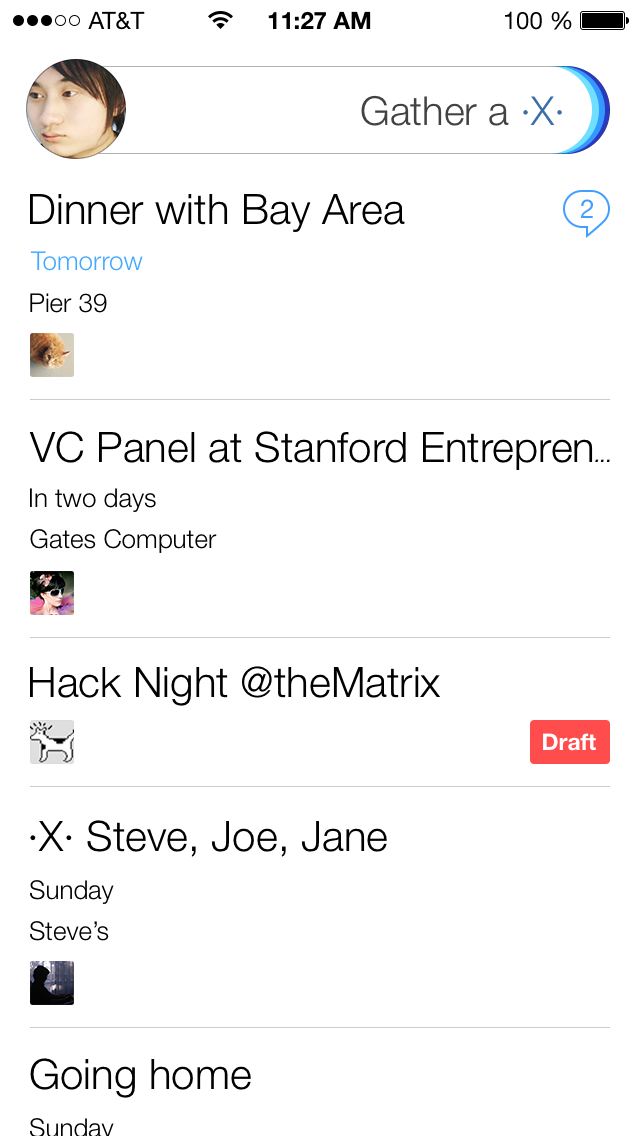
<style>
.page{position:relative;width:640px;height:1136px;background:#ffffff}
.page>*{position:absolute;margin:0}
.t1{font:24px "HelveticaNeueLTStd-Roman";color:#000000}
.t2{font:24px "HelveticaNeueLTStd-Bd";color:#000000}
.t3{font:40px "HelveticaNeue-Light";color:#424242}
.t4{font:40px "HelveticaNeue-Light";color:#3a6ea5}
.t5{font:42px "HelveticaNeue-Light";color:#000000}
.t6{font:26px "HelveticaNeue";color:#429eff}
.t7{font:26px "HelveticaNeue-Light";color:#44a9ff}
.t8{font:26px "HelveticaNeue-Light";color:#000000}
.t9{font:21px "HelveticaNeue-Italic";color:#000000}
.t10{font:23px "HelveticaNeue-Bold";color:#ffffff}
</style>
<div class="page">
<p class="t1" style="left:88px;top:11px;width:57px;height:19px">AT&amp;T</p>
<p class="t2" style="left:268px;top:11px;width:103px;height:18px">11:27 AM</p>
<p class="t1" style="left:505px;top:11px;width:67px;height:19px">100 %</p>
<p class="t3" style="left:361px;top:95px;width:201px;height:31px">Gather a <span class="t4">·X·</span></p>
<p class="t5" style="left:30px;top:194px;width:375px;height:38px">Dinner with Bay Area</p>
<p class="t6" style="left:580px;top:199px;width:13px;height:19px">2</p>
<p class="t7" style="left:30px;top:251px;width:113px;height:20px">Tomorrow</p>
<p class="t8" style="left:30px;top:293px;width:77px;height:20px">Pier 39</p>
<p class="t5" style="left:29px;top:431px;width:581px;height:39px">VC Panel at Stanford Entrepren<span class="t9">...</span></p>
<p class="t8" style="left:30px;top:488px;width:126px;height:24px">In two days</p>
<p class="t8" style="left:30px;top:529px;width:187px;height:24px">Gates Computer</p>
<p class="t5" style="left:30px;top:666px;width:410px;height:40px">Hack Night @theMatrix</p>
<p class="t10" style="left:543px;top:733px;width:53px;height:18px">Draft</p>
<p class="t5" style="left:30px;top:820px;width:357px;height:37px">·X· Steve, Joe, Jane</p>
<p class="t8" style="left:30px;top:880px;width:84px;height:24px">Sunday</p>
<p class="t8" style="left:30px;top:921px;width:79px;height:20px">Steve’s</p>
<p class="t5" style="left:30px;top:1058px;width:221px;height:40px">Going home</p>
</div>
